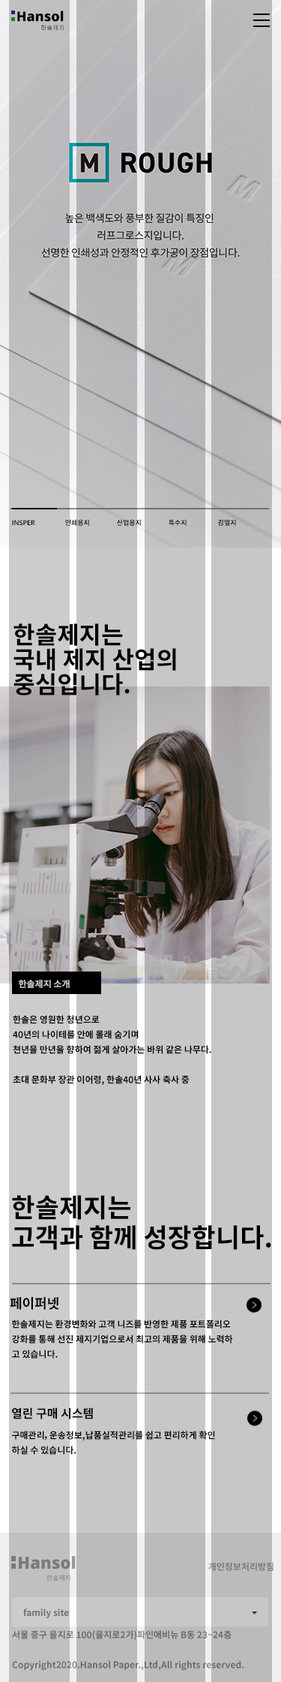
<style>
.page{position:relative;width:281px;height:1682px;background:#c7c7c7}
.page>*{position:absolute;margin:0}
.t1{font:13.5px "OpenSans-ExtraBold";color:#000000}
.t2{font:6px "Gulim"}
.t3{font:6.8px "OpenSans-SemiBold";color:#000000}
.t4{font:6.8px "NotoSansKR-Bold";color:#000000}
.t5{font:6.8px "NotoSansCJKkr-Bold";color:#000000}
.t6{font:24px/24.8px "NotoSansKR-Bold";color:#000000}
.t7{font:9px "NotoSansKR-Bold";color:#cccccc}
.t8{font:9px/15px "NotoSansKR-Bold";color:#000000}
.t9{font:26.2px/30px "NotoSansKR-Bold";color:#020202}
.t10{font:13.5px "NotoSansKR-Bold";color:#020202}
.t11{font:9px/15px "NotoSansKR-Bold";color:#020202}
.t12{font:12px "NotoSansKR-Bold";color:#020202}
.t13{font:16.5px "OpenSans-ExtraBold";color:#7a7a7a}
.t14{font:9px "NotoSansKR-Bold";color:#777777}
.t15{font:6.8px "NotoSansKR-Regular";color:#999999}
.t16{font:9px "NotoSansKR-Bold";color:#6c6c6c}
.t17{font:9px/30px "NotoSansKR-Bold";color:#696969}
</style>
<div class="page">
<p class="t1" style="left:17px;top:10px;width:47px;height:12px">Hansol</p>
<p class="t2" style="left:41px;top:25px;width:23px;height:6px">한솔제지</p>
<p class="t3" style="left:12px;top:520px;width:23px;height:5px">INSPER</p>
<p class="t4" style="left:65px;top:519px;width:24px;height:7px">인쇄용지</p>
<p class="t5" style="left:117px;top:519px;width:24px;height:7px">산업용지</p>
<p class="t4" style="left:169px;top:519px;width:18px;height:7px">특수지</p>
<p class="t4" style="left:218px;top:519px;width:18px;height:7px">감열지</p>
<p class="t6" style="left:14px;top:623px;width:162px;height:72px">한솔제지는<br>국내 제지 산업의<br>중심입니다.</p>
<p class="t7" style="left:19px;top:980px;width:51px;height:8px">한솔제지 소개</p>
<p class="t8" style="left:13px;top:1015px;width:199px;height:69px">한솔은 영원한 청년으로<br>40년의 나이테를 안에 몰래 숨기며<br>쳔년을 만년을 향하여 젊게 살아가는 바위 같은 나무다.<br><br>초대 문화부 장관 이어령, 한솔40년 사사 축사 중</p>
<p class="t9" style="left:12px;top:1195px;width:260px;height:55px">한솔제지는<br>고객과 함께 성장합니다.</p>
<p class="t10" style="left:10px;top:1296px;width:49px;height:14px">페이퍼넷</p>
<p class="t11" style="left:12px;top:1319px;width:221px;height:39px">한솔제지는 환경변화와 고객 니즈를 반영한 제품 포트폴리오<br>강화를 통해 선진 제지기업으로서 최고의 제품을 위해 노력하<br>고 있습니다.</p>
<p class="t12" style="left:12px;top:1407px;width:81px;height:12px">열린 구매 시스템</p>
<p class="t11" style="left:12px;top:1430px;width:203px;height:24px">구매관리,운송정보,납품실적관리를 쉽고 편리하게 확인<br>하실 수 있습니다.</p>
<p class="t13" style="left:19px;top:1556px;width:57px;height:13px">Hansol</p>
<p class="t14" style="left:208px;top:1562px;width:66px;height:8px">개인정보처리방침</p>
<p class="t15" style="left:46px;top:1574px;width:24px;height:7px">한솔제지</p>
<p class="t16" style="left:23px;top:1608px;width:46px;height:10px">family site</p>
<p class="t17" style="left:12px;top:1630px;width:232px;height:40px">서울 중구 을지로 100(을지로2가)파인애비뉴 B동 23~24층<br>Copyright2020.Hansol Paper.,Ltd,All rights reserved.</p>
</div>
